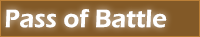
<style>
.page{position:relative;width:200px;height:37px;background:#825927}
.page>*{position:absolute;margin:0}
.t1{font:25.8px "ErasITC-Demi";color:#ffffff}
</style>
<div class="page">
<p class="t1" style="left:5px;top:9px;width:162px;height:19px">Pass of Battle</p>
</div>
